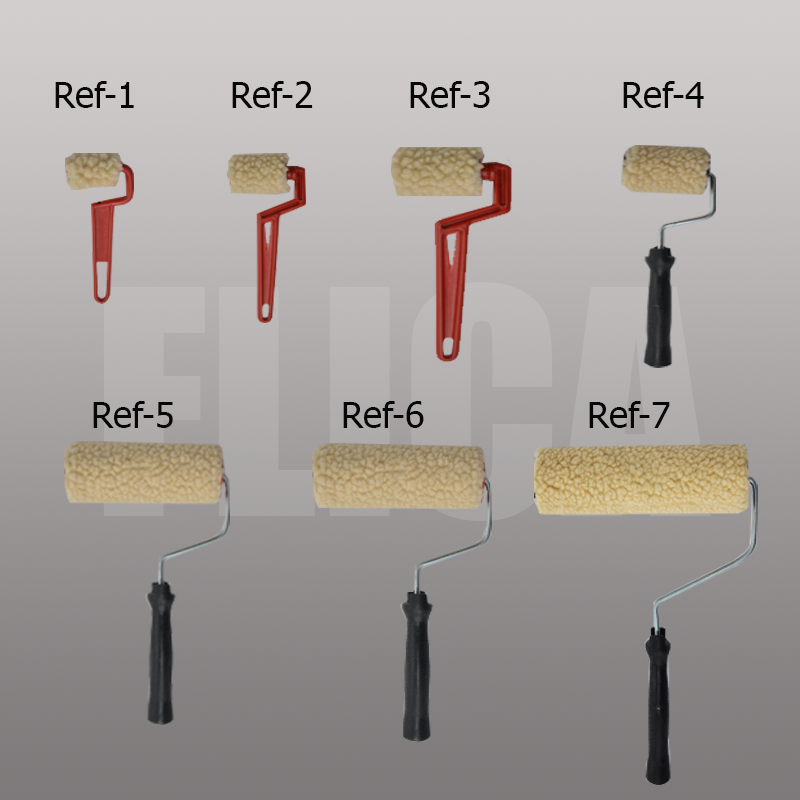
<style>
.page{position:relative;width:800px;height:800px}
.page>*{position:absolute;margin:0}
.t1{font:36px "Tahoma";color:#070707}
</style>
<div class="page">
<p class="t1" style="left:55px;top:81px;width:79px;height:27px">Ref-1</p>
<p class="t1" style="left:232px;top:81px;width:81px;height:27px">Ref-2</p>
<p class="t1" style="left:410px;top:81px;width:80px;height:27px">Ref-3</p>
<p class="t1" style="left:623px;top:81px;width:81px;height:27px">Ref-4</p>
<p class="t1" style="left:93px;top:401px;width:80px;height:27px">Ref-5</p>
<p class="t1" style="left:343px;top:401px;width:81px;height:27px">Ref-6</p>
<p class="t1" style="left:589px;top:401px;width:81px;height:27px">Ref-7</p>
</div>
